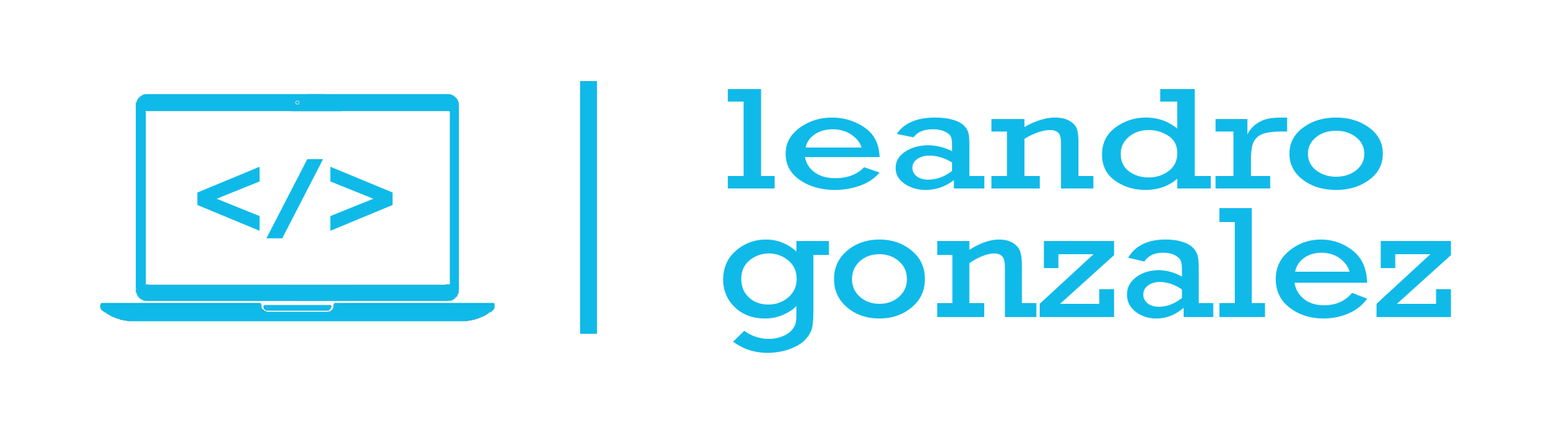
<style>
.page{position:relative;width:1568px;height:428px;background:#ffffff}
.page>*{position:absolute;margin:0}
.t1{font:146.4px "Rockwell";color:#0fbae9;scale:1.28 1}
.t2{font:112.9px "Rockwell-Bold";color:#0fbae9}
.t3{font:160.8px "Rockwell";color:#0fbae9;scale:1.14 1}
</style>
<div class="page">
<p class="t1" style="left:728px;top:88px;width:655px;height:102px">leandro</p>
<p class="t2" style="left:197px;top:159px;width:196px;height:80px">&lt;/&gt;</p>
<p class="t3" style="left:723px;top:208px;width:728px;height:145px">gonzalez</p>
</div>
